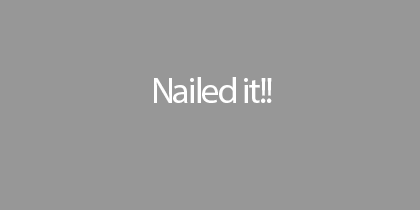
<style>
.page{position:relative;width:420px;height:210px;background:#979797}
.page>*{position:absolute;margin:0}
.t1{font:36px "MyriadPro-Regular";letter-spacing:-0.05em;color:#ffffff}
</style>
<div class="page">
<p class="t1" style="left:154px;top:77px;width:118px;height:26px">Nailed it!!</p>
</div>
